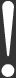
<style>
.page{position:relative;width:16px;height:78px;background:#333333}
.page>*{position:absolute;margin:0}
.t1{font:95.8px "HanWangWCL06";color:#ffffff}
</style>
<div class="page">
<p class="t1" style="left:1px;top:1px;width:14px;height:76px">！</p>
</div>
